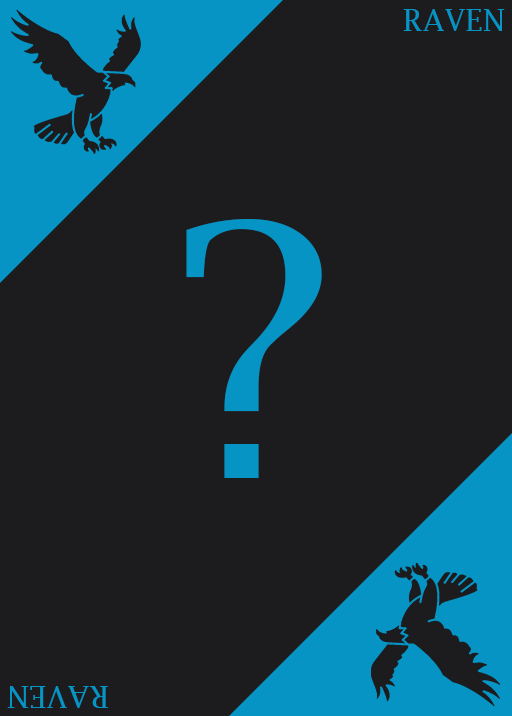
<style>
.page{position:relative;width:512px;height:716px;background:#1c1c1e}
.page>*{position:absolute;margin:0}
.t1{font:30px "LucidaFax";color:#0594c3}
.t2{font:350px "LucidaBright";color:#0594c3}
</style>
<div class="page">
<p class="t1" style="left:403px;top:9px;width:102px;height:22px">RAVEN</p>
<p class="t2" style="left:186px;top:219px;width:136px;height:259px">?</p>
<p class="t1" style="left:7px;top:686px;width:101px;height:22px;rotate:180deg">RAVEN</p>
</div>
